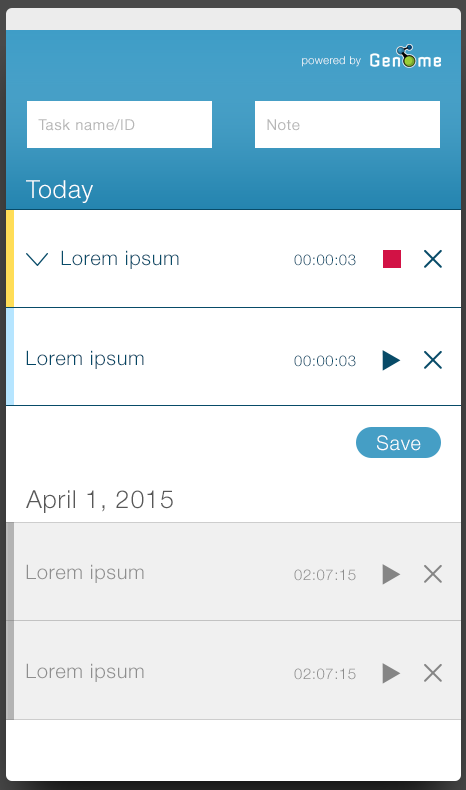
<style>
.page{position:relative;width:466px;height:790px;background:#ffffff}
.page>*{position:absolute;margin:0}
.t1{font:11px "HelveticaNeueLTStd-Lt";letter-spacing:0.034em;color:#ffffff}
.t2{font:15px "HelveticaNeueLTStd-Roman";letter-spacing:0.034em;color:#b6b6b6}
.t3{font:25px "HelveticaNeueLTStd-Lt";letter-spacing:0.034em;color:#ffffff}
.t4{font:20px "HelveticaNeueLTStd-Lt";letter-spacing:0.034em;color:#084b68}
.t5{font:15px "HelveticaNeueLTStd-Lt";letter-spacing:0.034em;color:#084b68}
.t6{font:20px "HelveticaNeueLTStd-Lt";letter-spacing:0.034em;color:#034664}
.t7{font:20px "HelveticaNeue-Light";letter-spacing:0.034em;color:#ffffff}
.t8{font:25px "HelveticaNeueLTStd-Lt";letter-spacing:0.034em;color:#585858}
.t9{font:20px "HelveticaNeueLTStd-Lt";letter-spacing:0.034em;color:#8e8e8e}
.t10{font:15px "HelveticaNeueLTStd-Lt";letter-spacing:0.034em;color:#8e8e8e}
</style>
<div class="page">
<p class="t1" style="left:302px;top:56px;width:59px;height:11px">powered by</p>
<p class="t2" style="left:38px;top:119px;width:97px;height:12px">Task name/ID</p>
<p class="t2" style="left:267px;top:119px;width:33px;height:12px">Note</p>
<p class="t3" style="left:26px;top:180px;width:67px;height:23px">Today</p>
<p class="t4" style="left:61px;top:250px;width:118px;height:19px">Lorem ipsum</p>
<p class="t5" style="left:294px;top:254px;width:62px;height:12px">00:00:03</p>
<p class="t6" style="left:26px;top:350px;width:118px;height:19px">Lorem ipsum</p>
<p class="t5" style="left:294px;top:355px;width:62px;height:12px">00:00:03</p>
<p class="t7" style="left:377px;top:435px;width:44px;height:16px">Save</p>
<p class="t8" style="left:26px;top:490px;width:147px;height:23px">April 1, 2015</p>
<p class="t9" style="left:26px;top:564px;width:118px;height:19px">Lorem ipsum</p>
<p class="t10" style="left:294px;top:569px;width:62px;height:12px">02:07:15</p>
<p class="t9" style="left:26px;top:663px;width:118px;height:19px">Lorem ipsum</p>
<p class="t10" style="left:294px;top:668px;width:62px;height:12px">02:07:15</p>
</div>
